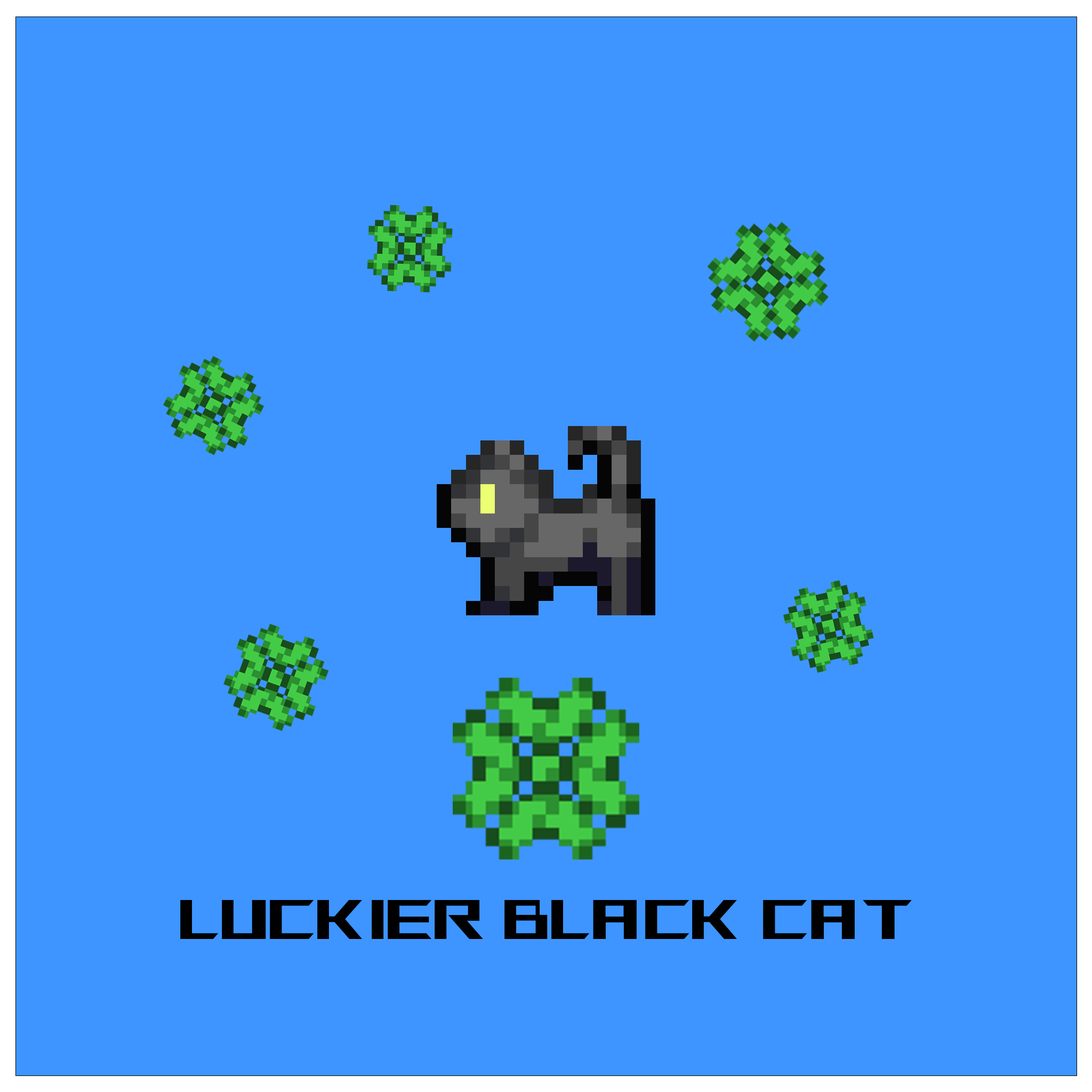
<style>
.page{position:relative;width:1092px;height:1092px;background:#3e95ff}
.page>*{position:absolute;margin:0}
.t1{font:13.4px "AniMeMatrix-MB_EN";color:#000000}
</style>
<div class="page">
<p class="t1" style="left:180px;top:900px;width:732px;height:39px">Luckier Black Cat</p>
</div>
